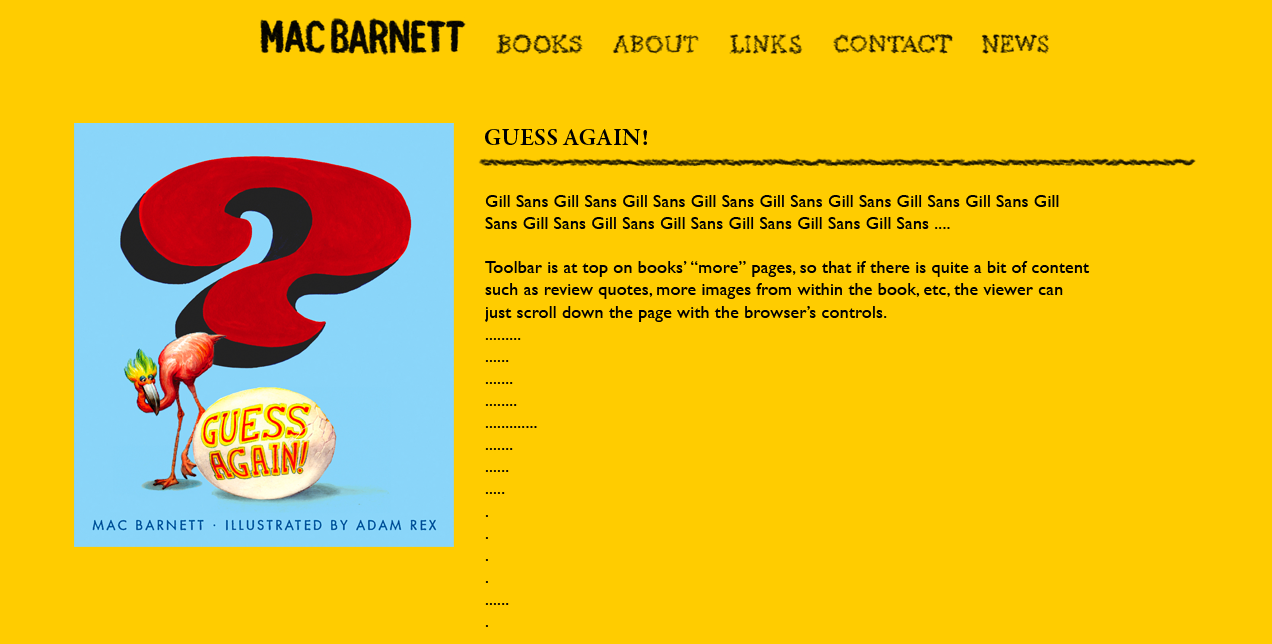
<style>
.page{position:relative;width:1272px;height:644px;background:#ffcc00}
.page>*{position:absolute;margin:0}
.t1{font:24px "GaramondPremrPro-Smbd";color:#000000}
.t2{font:18.4px "GillSans";color:#000000}
</style>
<div class="page">
<p class="t1" style="left:485px;top:129px;width:162px;height:16px">GUESS AGAIN!</p>
<p class="t2" style="left:485px;top:195px;width:605px;height:432px">Gill Sans Gill Sans Gill Sans Gill Sans Gill Sans Gill Sans Gill Sans Gill Sans Gill <br>Sans Gill Sans Gill Sans Gill Sans Gill Sans Gill Sans Gill Sans ....<br><br>Toolbar is at top on books’ “more” pages, so that if there is quite a bit of content<br>such as review quotes, more images from within the book, etc, the viewer can<br>just scroll down the page with the browser’s controls.<br>.........<br>......<br>.......<br>........<br>.............<br>.......<br>......<br>.....<br>.<br>.<br>.<br>.<br>......<br>.</p>
</div>
